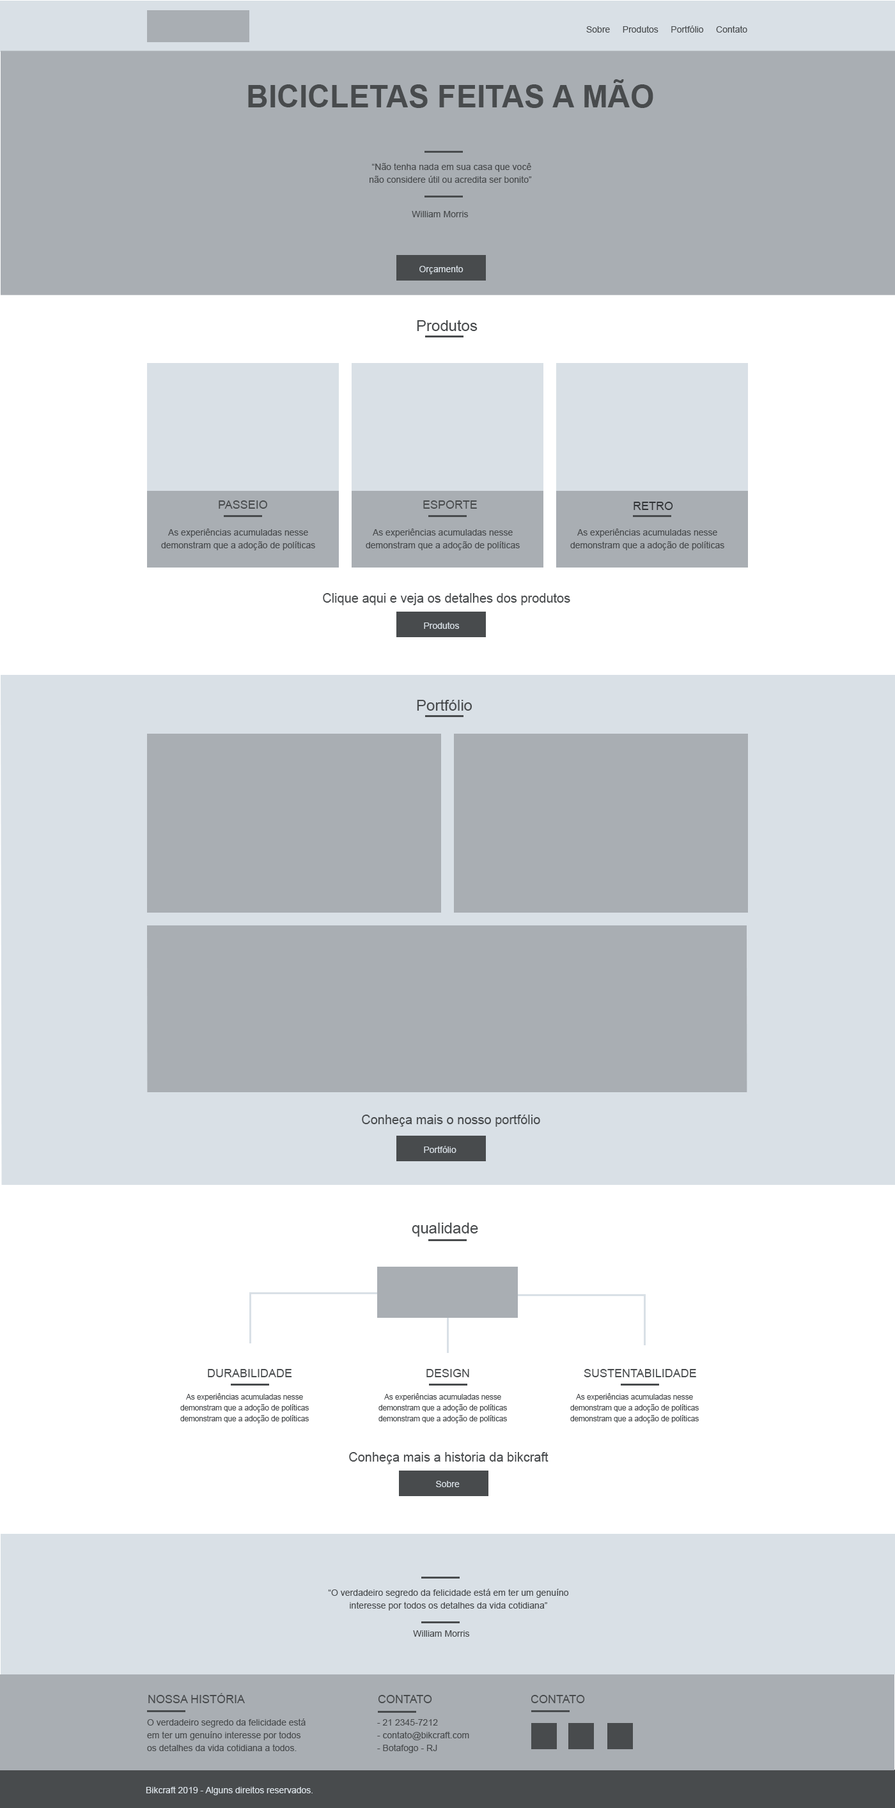
<style>
.page{position:relative;width:895px;height:1808px;background:#a9aeb3}
.page>*{position:absolute;margin:0}
.t1{font:8.9px "ArialMT";color:#484b4d}
.t2{font:30.9px "Arial-BoldMT";color:#484b4d;text-transform:uppercase}
.t3{font:9px/12.9px "ArialMT";color:#484b4d}
.t4{font:9px "ArialMT";color:#484b4d}
.t5{font:8.9px "ArialMT";color:#d9e0e6}
.t6{font:15.3px "ArialMT";color:#484b4d}
.t7{font:11.5px "ArialMT";color:#484b4d;text-transform:uppercase}
.t8{font:8.9px/12.8px "ArialMT";color:#484b4d}
.t9{font:12.8px "ArialMT";color:#484b4d}
.t10{font:7.5px/10.7px "ArialMT";color:#484b4d}
</style>
<div class="page">
<p class="t1" style="left:586px;top:26px;width:161px;height:7px">Sobre     Produtos     Portfólio     Contato</p>
<p class="t2" style="left:248px;top:79px;width:405px;height:29px">Bicicletas Feitas a Mão</p>
<p class="t3" style="left:369px;top:163px;width:163px;height:20px;text-align:center">“Não tenha nada em sua casa que você<br> não considere útil ou acredita ser bonito”</p>
<p class="t4" style="left:412px;top:211px;width:57px;height:6px">William Morris</p>
<p class="t5" style="left:419px;top:265px;width:44px;height:9px">Orçamento</p>
<p class="t6" style="left:417px;top:320px;width:60px;height:11px">Produtos</p>
<p class="t7" style="left:219px;top:500px;width:48px;height:9px">Passeio</p>
<p class="t7" style="left:423px;top:500px;width:54px;height:9px">esporte</p>
<p class="t7" style="left:633px;top:502px;width:40px;height:8px">Retro</p>
<p class="t8" style="left:161px;top:529px;width:154px;height:21px">As experiências acumuladas nesse               demonstram que a adoção de políticas</p>
<p class="t8" style="left:366px;top:529px;width:154px;height:21px">As experiências acumuladas nesse               demonstram que a adoção de políticas</p>
<p class="t8" style="left:570px;top:529px;width:154px;height:21px">As experiências acumuladas nesse               demonstram que a adoção de políticas</p>
<p class="t9" style="left:323px;top:593px;width:247px;height:12px">Clique aqui e veja os detalhes dos produtos</p>
<p class="t5" style="left:424px;top:622px;width:36px;height:7px">Produtos</p>
<p class="t6" style="left:417px;top:699px;width:55px;height:12px">Portfólio</p>
<p class="t9" style="left:362px;top:1115px;width:178px;height:12px">Conheça mais o nosso portfólio</p>
<p class="t5" style="left:424px;top:1146px;width:32px;height:7px">Portfólio</p>
<p class="t6" style="left:412px;top:1223px;width:66px;height:14px">qualidade</p>
<p class="t7" style="left:208px;top:1369px;width:84px;height:8px">Durabilidade</p>
<p class="t7" style="left:426px;top:1369px;width:43px;height:8px">design</p>
<p class="t7" style="left:584px;top:1369px;width:112px;height:8px">sustentabilidade</p>
<p class="t10" style="left:180px;top:1393px;width:129px;height:31px">As experiências acumuladas nesse                demonstram que a adoção de políticas demonstram que a adoção de políticas</p>
<p class="t10" style="left:378px;top:1393px;width:129px;height:31px">As experiências acumuladas nesse                demonstram que a adoção de políticas demonstram que a adoção de políticas</p>
<p class="t10" style="left:570px;top:1393px;width:129px;height:31px">As experiências acumuladas nesse                demonstram que a adoção de políticas demonstram que a adoção de políticas</p>
<p class="t9" style="left:349px;top:1452px;width:199px;height:12px">Conheça mais a historia da bikcraft</p>
<p class="t5" style="left:436px;top:1481px;width:24px;height:6px">Sobre</p>
<p class="t3" style="left:328px;top:1589px;width:241px;height:22px;text-align:center">“O verdadeiro segredo da felicidade está em ter um genuíno<br>interesse por todos os detalhes da vida cotidiana”</p>
<p class="t4" style="left:413px;top:1631px;width:57px;height:6px">William Morris</p>
<p class="t7" style="left:148px;top:1693px;width:97px;height:10px">Nossa História</p>
<p class="t7" style="left:378px;top:1695px;width:54px;height:8px">Contato</p>
<p class="t7" style="left:531px;top:1695px;width:54px;height:8px">Contato</p>
<p class="t8" style="left:147px;top:1719px;width:159px;height:32px">O verdadeiro segredo da felicidade está <br>em ter um genuíno interesse por todos<br>os detalhes da vida cotidiana a todos.</p>
<p class="t8" style="left:377px;top:1719px;width:92px;height:34px">- 21 2345-7212<br>- contato@bikcraft.com<br>- Botafogo - RJ</p>
<p class="t5" style="left:146px;top:1787px;width:167px;height:9px">Bikcraft 2019 - Alguns direitos reservados.</p>
</div>
